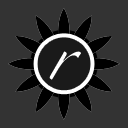
<style>
.page{position:relative;width:128px;height:128px;background:#333333}
.page>*{position:absolute;margin:0}
.t1{font:50.3px "Zapfino";letter-spacing:0.03em;color:#ffffff}
</style>
<div class="page">
<p class="t1" style="left:49px;top:51px;width:32px;height:29px">r</p>
</div>
